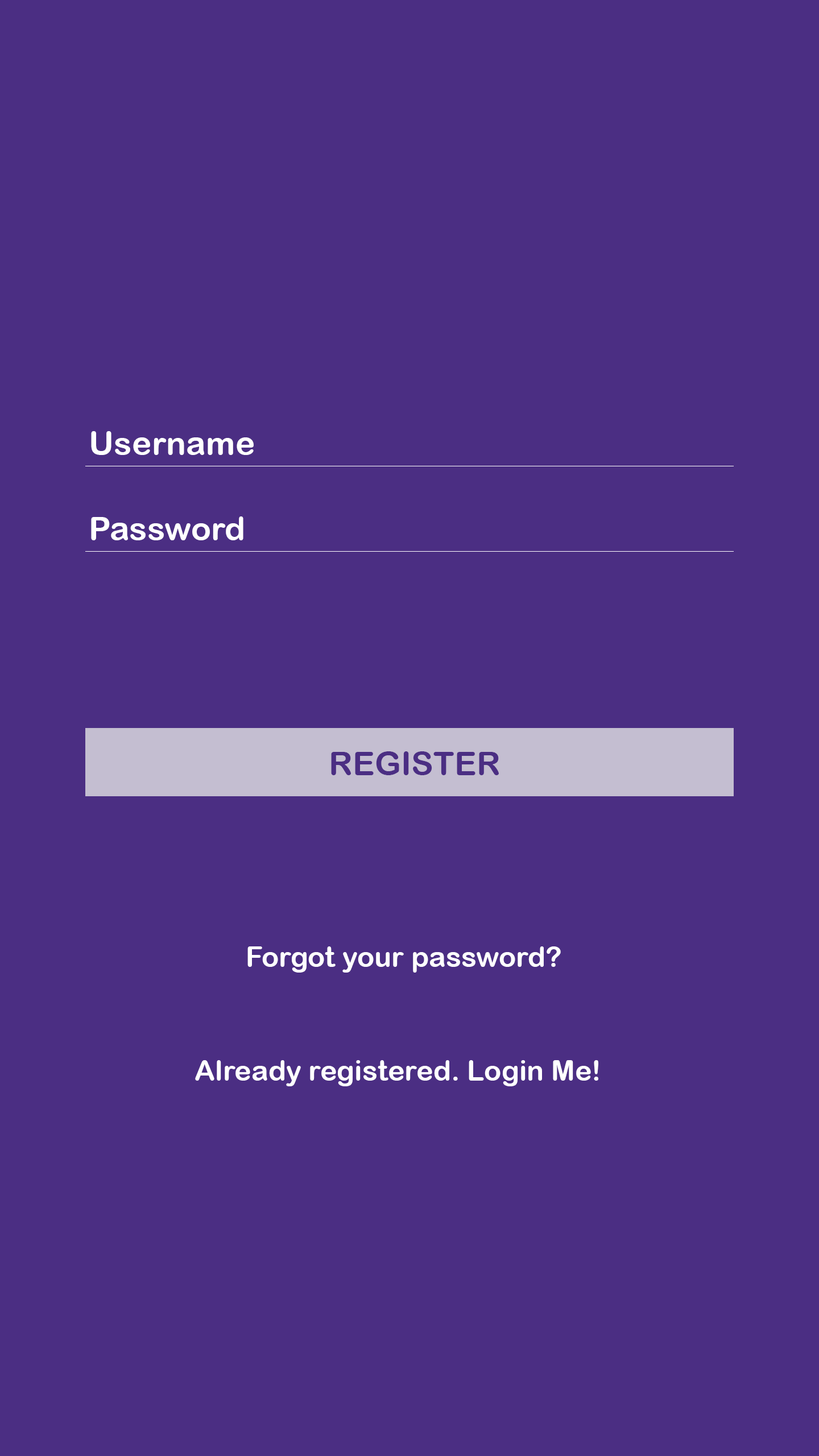
<style>
.page{position:relative;width:819px;height:1456px;background:#4b2e83}
.page>*{position:absolute;margin:0}
.t1{font:33.2px "ArialRoundedMTBold";color:#ffffff}
.t2{font:33.2px "ArialRoundedMTBold";color:#4b2e83}
.t3{font:28.4px "ArialRoundedMTBold";color:#ffffff}
</style>
<div class="page">
<p class="t1" style="left:91px;top:431px;width:163px;height:24px">Username</p>
<p class="t1" style="left:91px;top:516px;width:152px;height:24px">Password</p>
<p class="t2" style="left:331px;top:751px;width:168px;height:24px">REGISTER</p>
<p class="t3" style="left:247px;top:946px;width:314px;height:27px">Forgot your password?</p>
<p class="t3" style="left:195px;top:1060px;width:403px;height:26px">Already registered. Login Me!</p>
</div>
